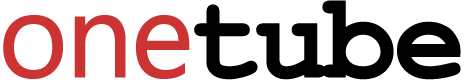
<style>
.page{position:relative;width:464px;height:80px;background:#ffffff}
.page>*{position:absolute;margin:0}
.t1{font:120px "CourierNewPS-BoldMT";letter-spacing:-0.05em;color:#000000;font-weight:bold}
.t2{font:120px "Ebrima";letter-spacing:-0.05em;color:#cc3333;font-weight:bold}
</style>
<div class="page">
<p class="t1" style="left:194px;top:0px;width:267px;height:80px">tube</p>
<p class="t2" style="left:3px;top:15px;width:187px;height:64px">one</p>
</div>
